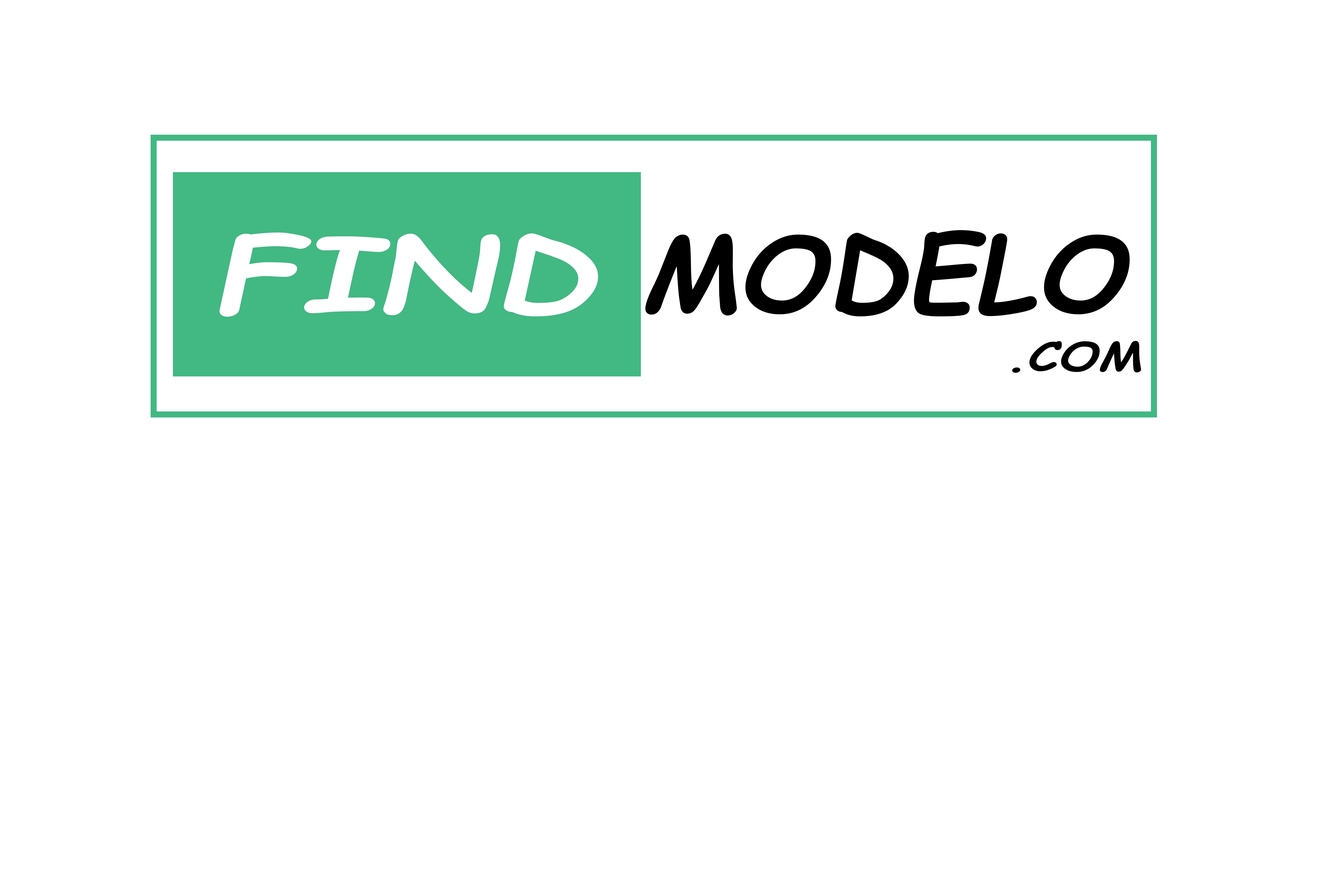
<style>
.page{position:relative;width:1337px;height:892px;background:#ffffff}
.page>*{position:absolute;margin:0}
.t1{font:102.5px "ComicSansMS-BoldItalic";color:#ffffff;text-transform:uppercase;scale:1.39 1}
.t2{font:103.3px "ComicSansMS-BoldItalic";color:#000000;text-transform:uppercase;scale:1.07 1}
.t3{font:39.8px "ComicSansMS-BoldItalic";color:#000000;text-transform:uppercase;scale:1.25 1}
</style>
<div class="page">
<p class="t1" style="left:219px;top:232px;width:379px;height:85px">find</p>
<p class="t2" style="left:646px;top:230px;width:484px;height:86px">MODELO</p>
<p class="t3" style="left:1012px;top:341px;width:130px;height:32px">.COM</p>
</div>
